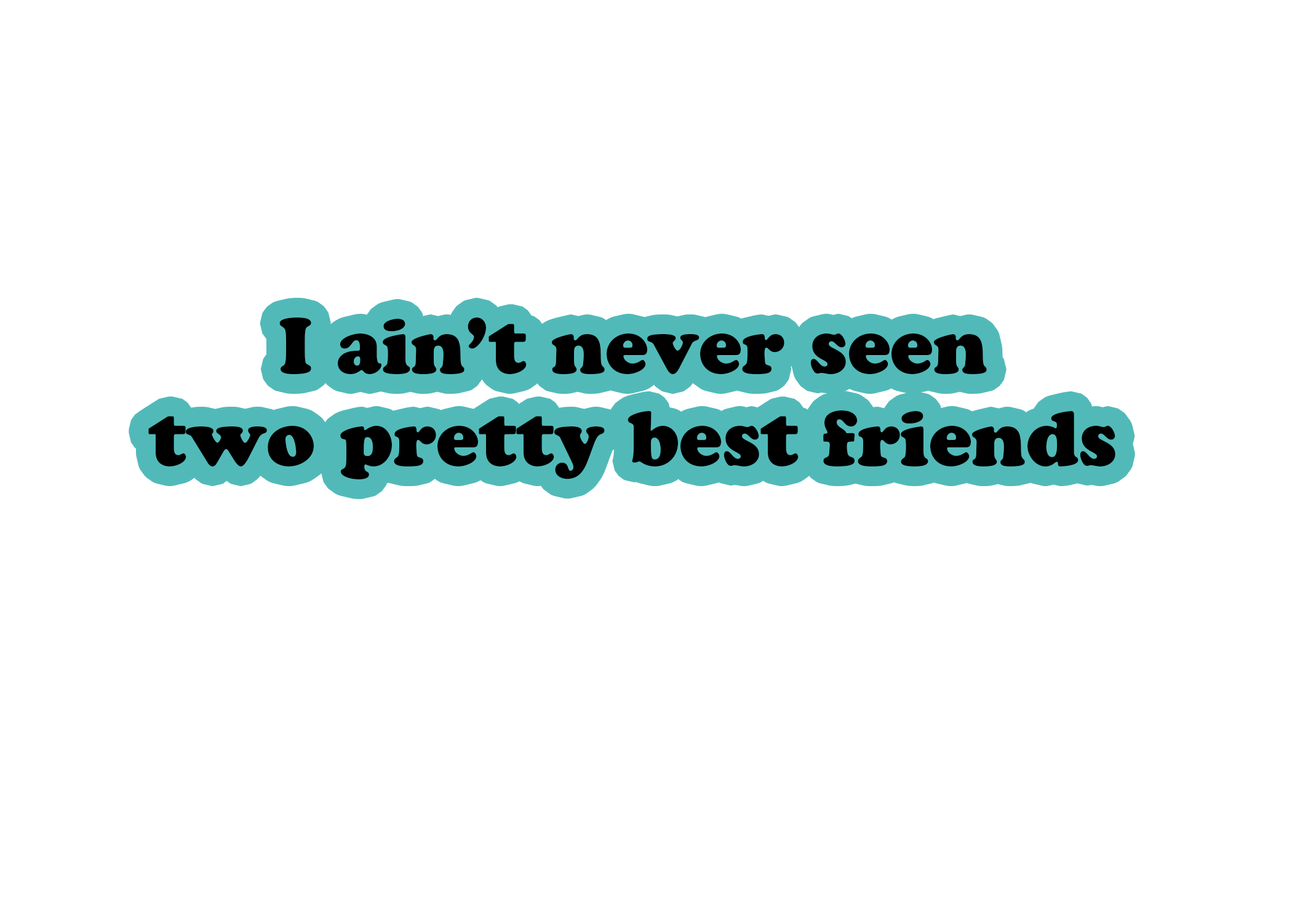
<style>
.page{position:relative;width:1292px;height:923px;background:#ffffff}
.page>*{position:absolute;margin:0}
.t1{font:76.9px "CooperBlackStd";color:#000000}
</style>
<div class="page">
<p class="t1" style="left:148px;top:317px;width:967px;height:162px;text-align:center">I ain’t never seen<br>two pretty best friends</p>
</div>
